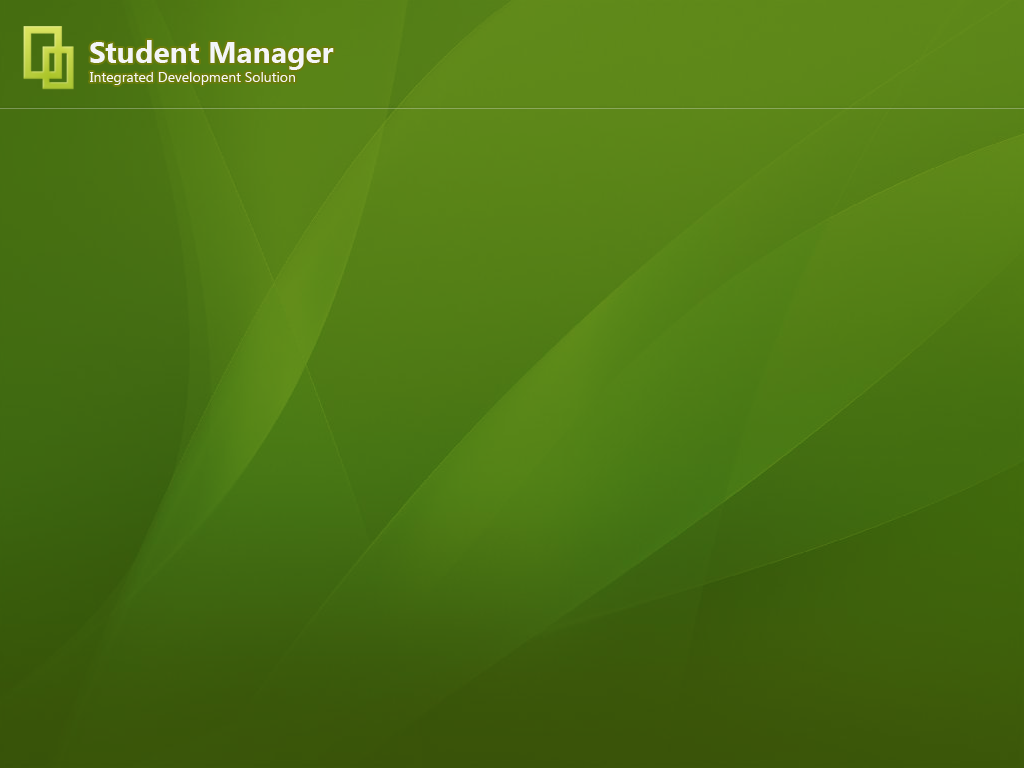
<style>
.page{position:relative;width:1024px;height:768px}
.page>*{position:absolute;margin:0}
.t1{font:30px "SegoeUI-Bold";color:#f4f5f8}
.t2{font:14px "SegoeUI";color:#f4f5f8}
</style>
<div class="page">
<p class="t1" style="left:90px;top:40px;width:244px;height:30px">Student Manager</p>
<p class="t2" style="left:90px;top:72px;width:205px;height:13px">Integrated Development Solution</p>
</div>
